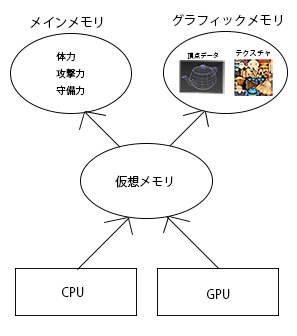
<style>
.page{position:relative;width:297px;height:336px;background:#ffffff}
.page>*{position:absolute;margin:0}
.t1{font:12.6px "KozGoPr6N-Regular";color:#000000}
.t2{font:9.6px "KozGoPr6N-Regular";color:#000000}
.t3{font:6.4px "KozGoPr6N-Regular";color:#000000}
.t4{font:7.2px "KozGoPr6N-Regular";color:#000000}
.t5{font:12px "KozGoPr6N-Regular";color:#000000}
</style>
<div class="page">
<p class="t1" style="left:30px;top:16px;width:73px;height:12px">メインメモリ</p>
<p class="t1" style="left:172px;top:14px;width:111px;height:13px">グラフィックメモリ</p>
<p class="t2" style="left:56px;top:52px;width:29px;height:43px">体力<br>攻撃力<br>守備力</p>
<p class="t3" style="left:187px;top:52px;width:31px;height:7px">頂点データ</p>
<p class="t4" style="left:235px;top:50px;width:35px;height:7px">ﾃクスチャ</p>
<p class="t5" style="left:115px;top:175px;width:58px;height:13px">仮想メモリ</p>
<p class="t5" style="left:62px;top:287px;width:22px;height:10px">CPU</p>
<p class="t5" style="left:207px;top:289px;width:23px;height:10px">GPU</p>
</div>
